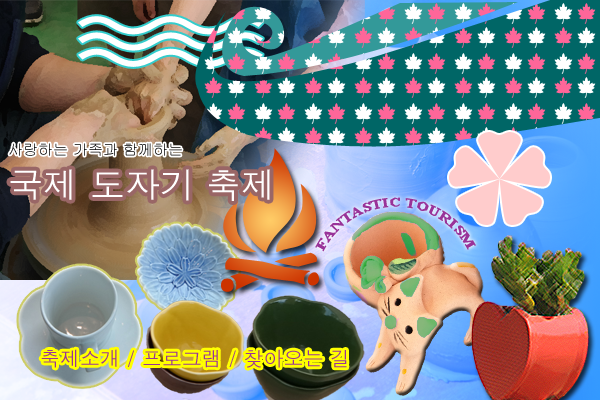
<style>
.page{position:relative;width:600px;height:400px}
.page>*{position:absolute;margin:0}
.t1{font:15px "Gulim"}
.t2{font:35px "Dotum";color:#ffffff}
.t3{font:13px "TimesNewRomanPS-BoldMT";color:#993399}
.t4{font:20px "Dotum";color:#993399}
</style>
<div class="page">
<p class="t1" style="left:9px;top:143px;width:173px;height:13px">사랑하는 가족과 함께하는</p>
<p class="t2" style="left:10px;top:169px;width:260px;height:32px">국제 도자기 축제</p>
<p class="t3" style="left:315px;top:197px;width:161px;height:55px">FANTASTIC TOURISM</p>
<p class="t4" style="left:41px;top:349px;width:306px;height:19px">축제소개 / 프로그램 / 찾아오는 길</p>
</div>
